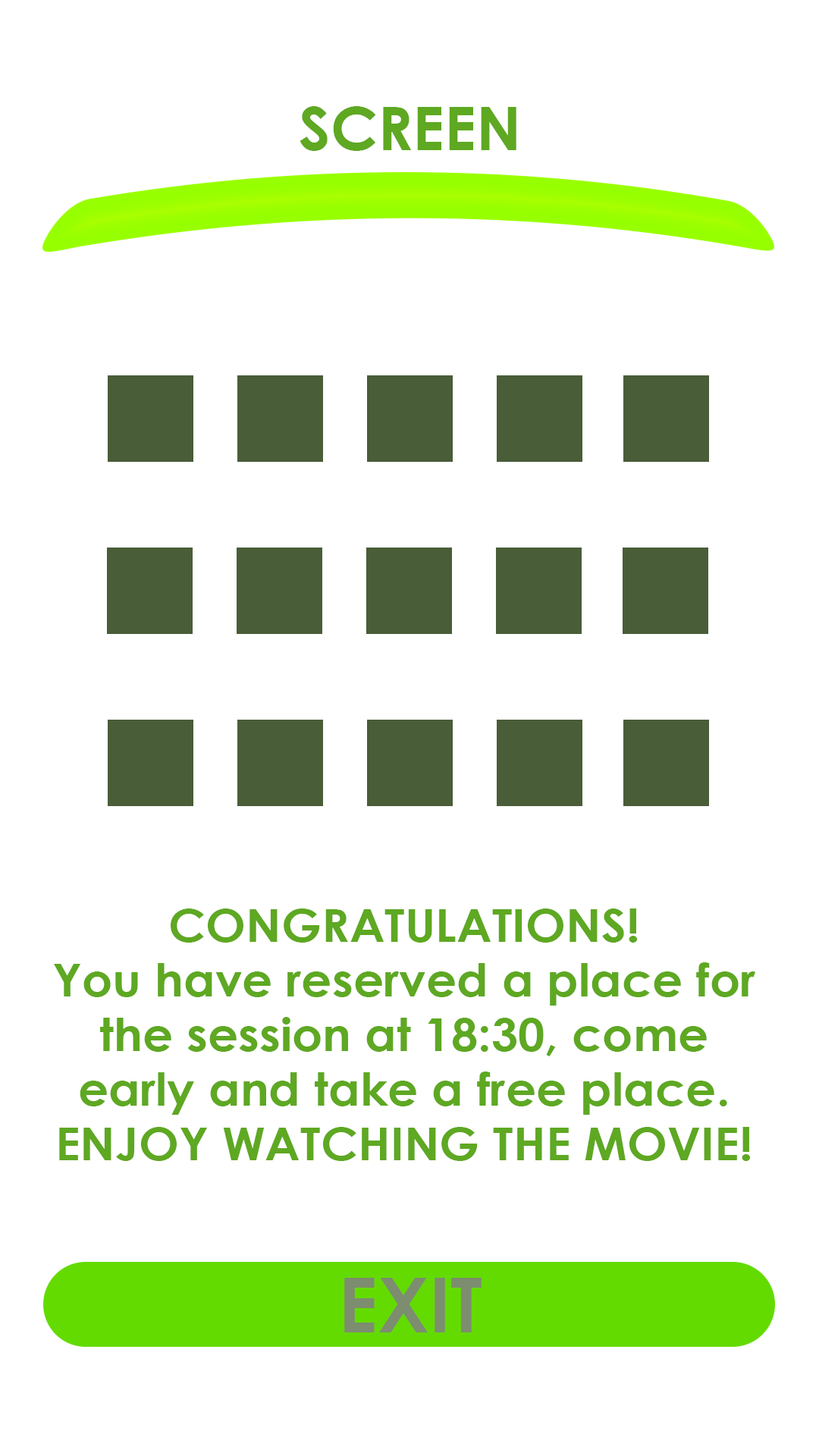
<style>
.page{position:relative;width:819px;height:1456px;background:#ffffff}
.page>*{position:absolute;margin:0}
.t1{font:60.5px "CenturyGothic-Bold";color:#5ea822}
.t2{font:45.5px "CenturyGothic-Bold";color:#5ea822;scale:1.05 1}
.t3{font:75.8px "CenturyGothic-Bold";color:#7d8d6f}
</style>
<div class="page">
<p class="t1" style="left:300px;top:106px;width:216px;height:45px">SCREEN</p>
<p class="t2" style="left:54px;top:908px;width:701px;height:253px;text-align:center">CONGRATULATIONS! <br>You have reserved a place for the session at 18:30, come early and take a free place.<br>ENJOY WATCHING THE MOVIE!</p>
<p class="t3" style="left:344px;top:1278px;width:138px;height:54px">EXIT</p>
</div>
